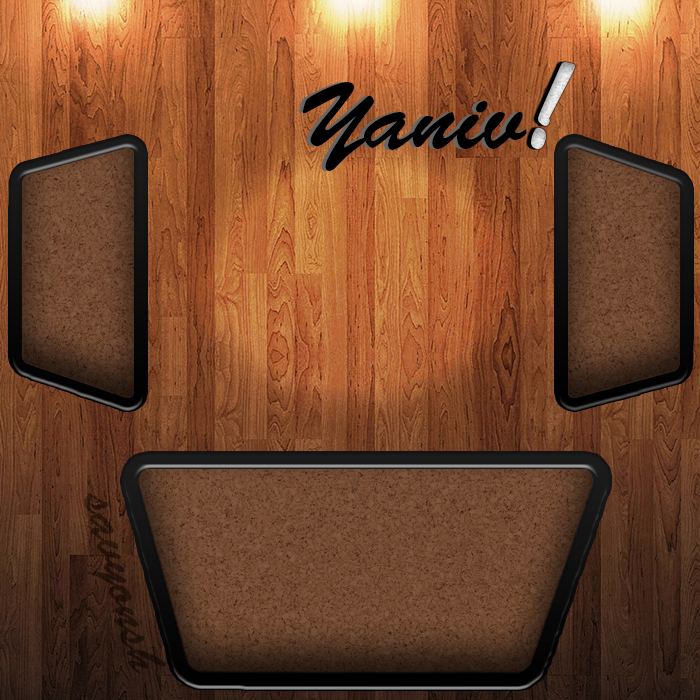
<style>
.page{position:relative;width:700px;height:700px}
.page>*{position:absolute;margin:0}
.t1{font:95.8px "BrushScriptStd";color:#000000}
.t2{font:54.2px "BrushScriptStd";color:#23120a}
</style>
<div class="page">
<p class="t1" style="left:302px;top:82px;width:225px;height:89px">Yaniv</p>
<p class="t2" style="left:84px;top:492px;width:82px;height:182px;rotate:75deg">savyonsh</p>
</div>
